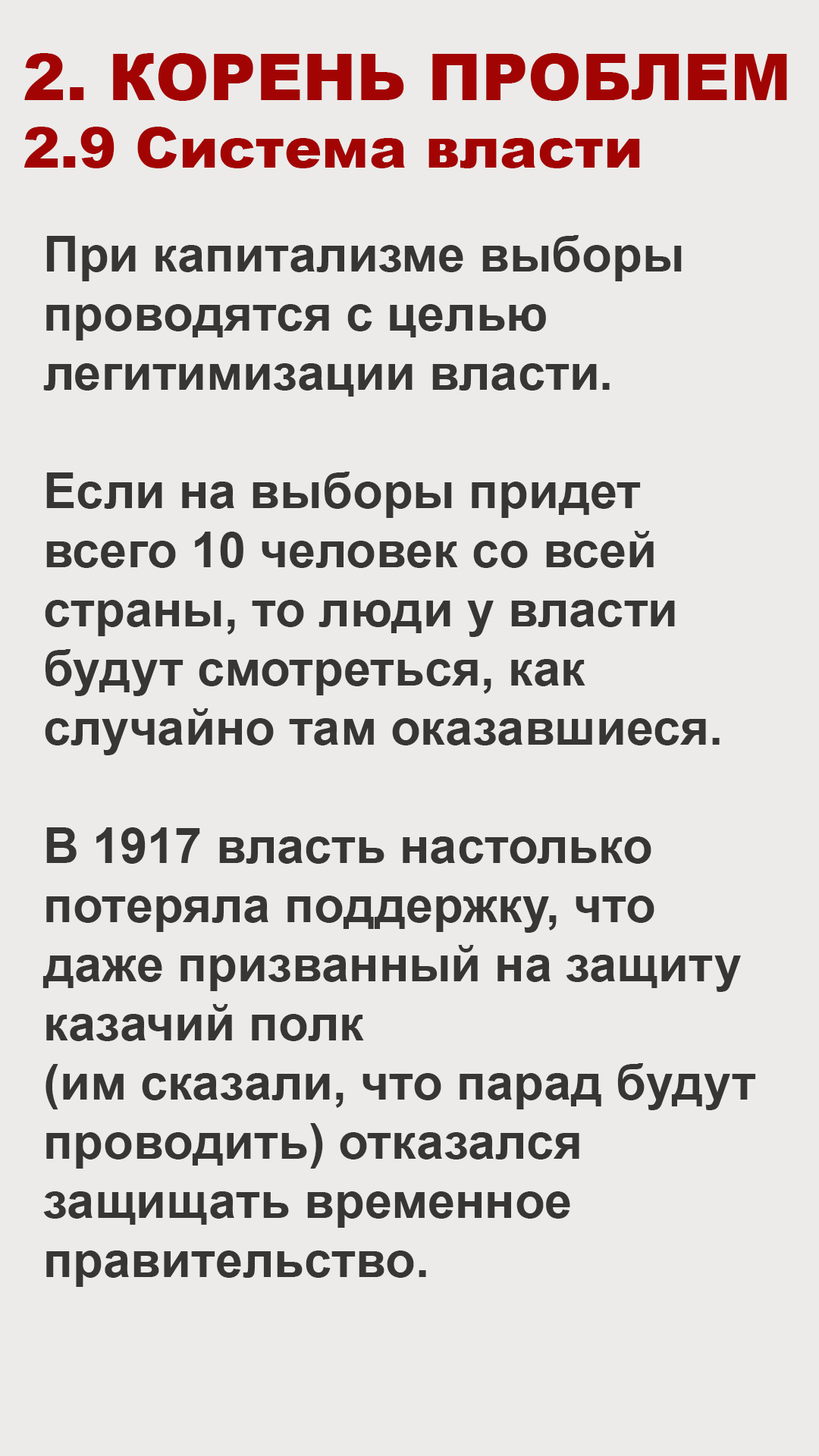
<style>
.page{position:relative;width:819px;height:1456px;background:#ecebe9}
.page>*{position:absolute;margin:0}
.t1{font:56.1px "Arial-Black";color:#a20403}
.t2{font:64.5px "Arial-Black";color:#a20403}
.t3{font:49.3px "Arial-BoldMT";color:#373634}
</style>
<div class="page">
<p class="t1" style="left:24px;top:53px;width:763px;height:115px"><span class="t2">2. КОРЕНЬ ПРОБЛЕМ<br></span>2.9 Система власти</p>
<p class="t3" style="left:42px;top:235px;width:714px;height:1052px">При капитализме выборы <br>проводятся с целью<br>легитимизации власти.<br><br>Если на выборы придет <br>всего 10 человек со всей<br>страны, то люди у власти<br>будут смотреться, как <br>случайно там оказавшиеся.<br><br>В 1917 власть настолько<br>потеряла поддержку, что<br>даже призванный на защиту<br>казачий полк<br>(им сказали, что парад будут<br>проводить) отказался<br>защищать временное<br>правительство.</p>
</div>
